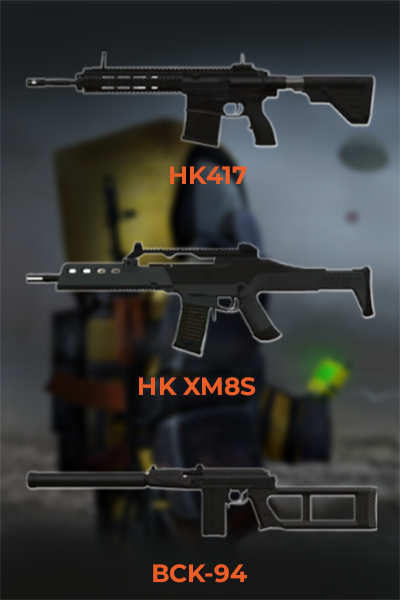
<style>
.page{position:relative;width:400px;height:600px}
.page>*{position:absolute;margin:0}
.t1{font:27px "MontserratAce-Bold";color:#eb5e28}
</style>
<div class="page">
<p class="t1" style="left:170px;top:166px;width:77px;height:18px">HK417</p>
<p class="t1" style="left:139px;top:377px;width:117px;height:19px">HK XM8S</p>
<p class="t1" style="left:153px;top:564px;width:94px;height:19px">ВСK-94</p>
</div>
